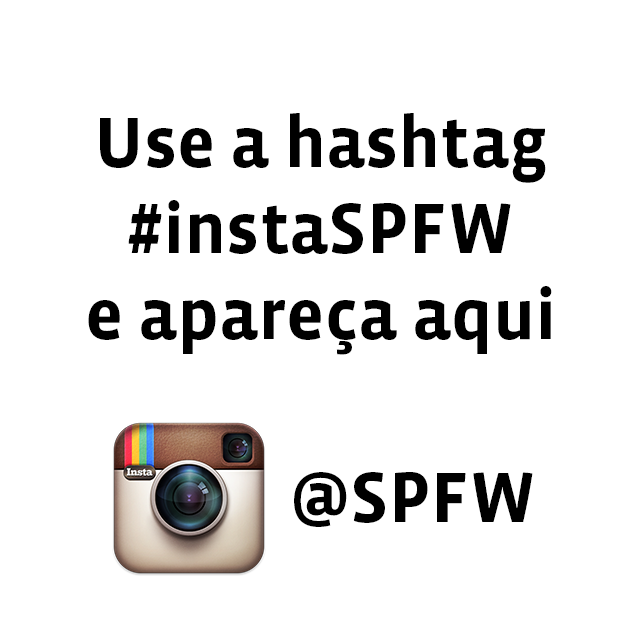
<style>
.page{position:relative;width:640px;height:640px;background:#ffffff}
.page>*{position:absolute;margin:0}
.t1{font:72px "VistaSansOT-Bold";color:#000000}
</style>
<div class="page">
<p class="t1" style="left:88px;top:113px;width:464px;height:242px;text-align:center">Use a hashtag<br>#instaSPFW<br>e apareça aqui</p>
<p class="t1" style="left:294px;top:472px;width:239px;height:55px">@SPFW</p>
</div>
